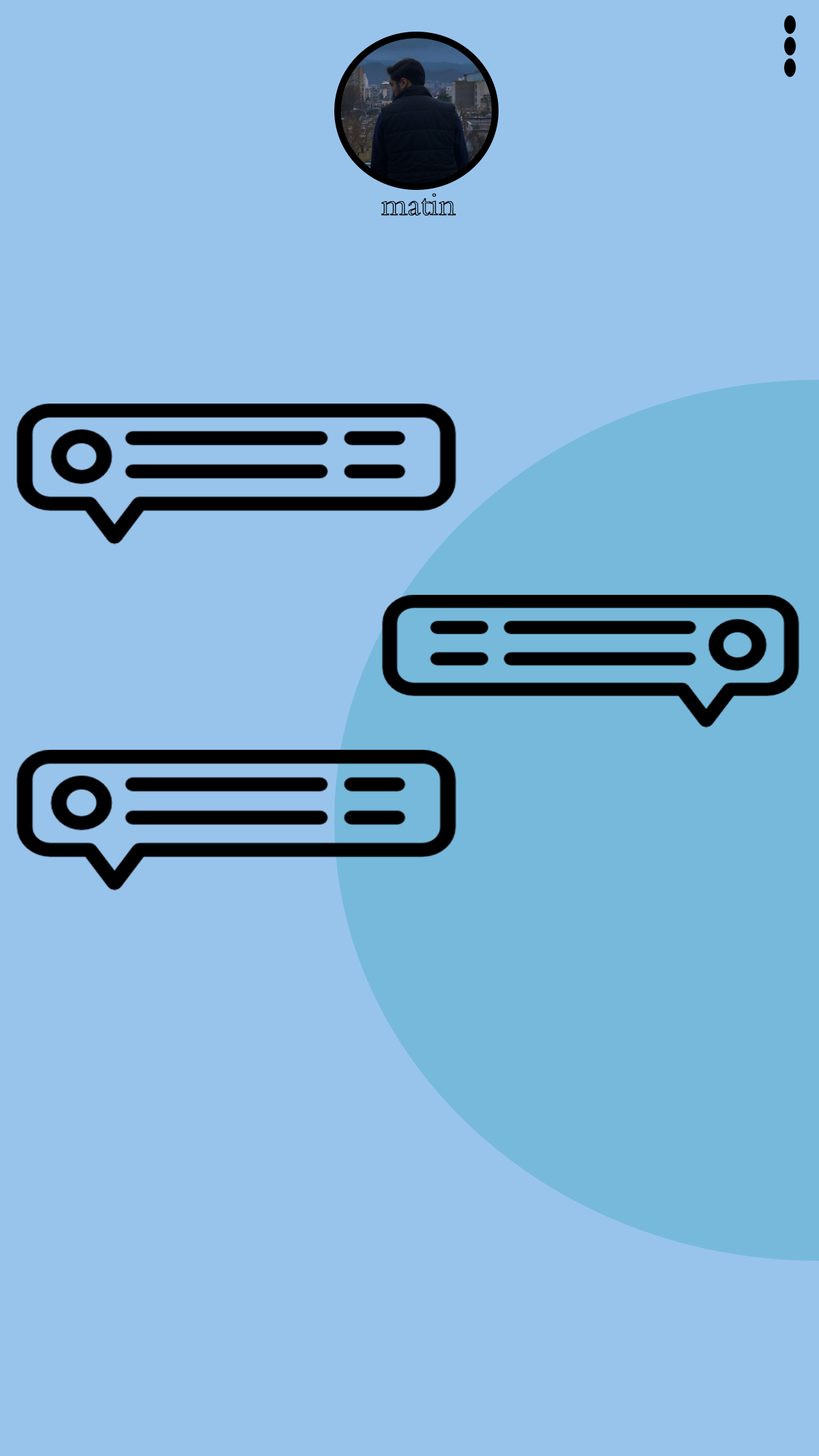
<style>
.page{position:relative;width:819px;height:1456px;background:#98c4ec}
.page>*{position:absolute;margin:0}
.t1{font:33px "Mj_NaskhTitrOutline";color:#020202}
</style>
<div class="page">
<p class="t1" style="left:381px;top:193px;width:75px;height:23px">matin</p>
</div>
